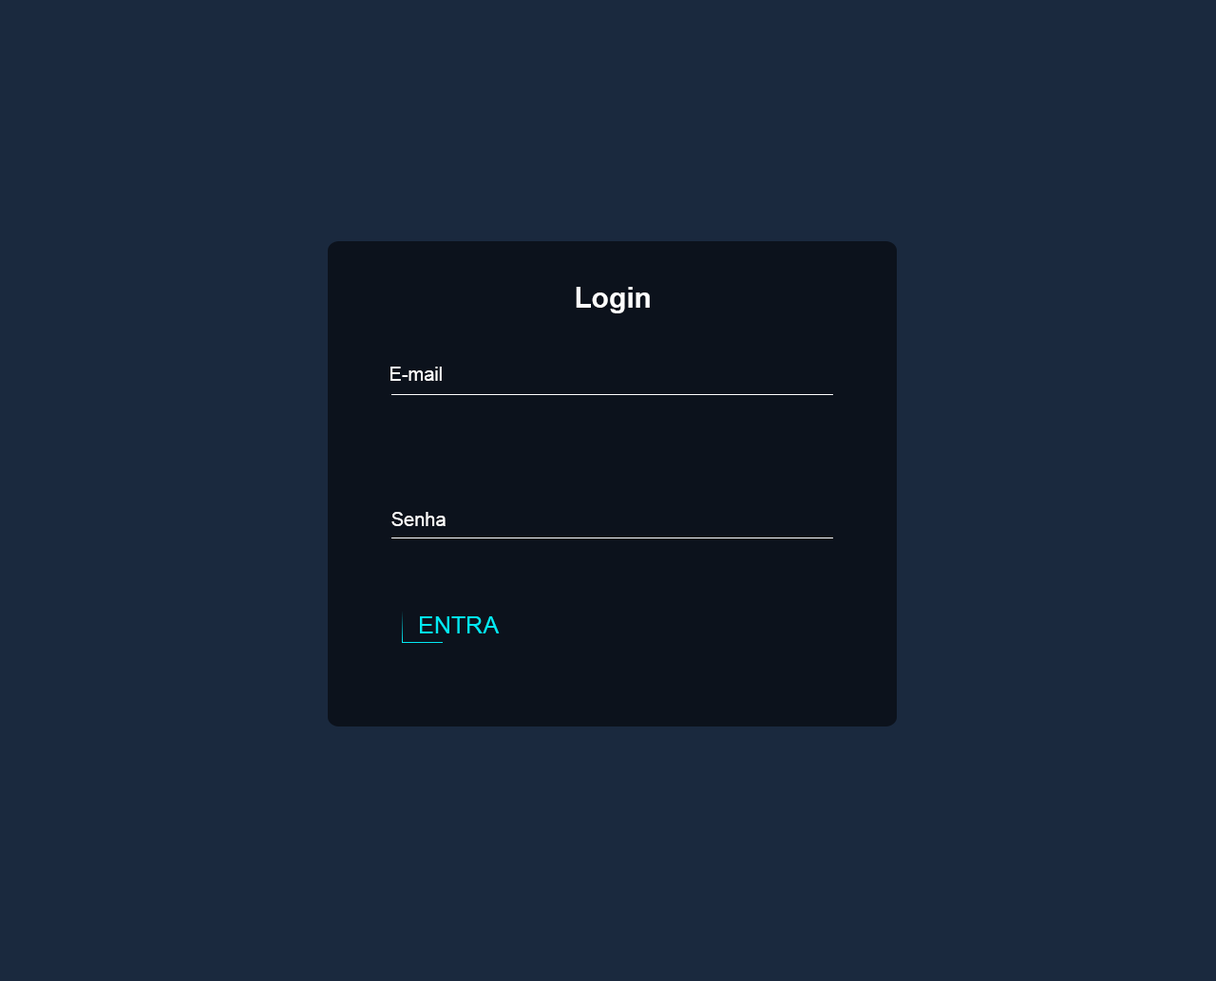
<style>
.page{position:relative;width:1216px;height:981px;background:#1a293e}
.page>*{position:absolute;margin:0}
.t1{font:28.5px "Arial-BoldMT";color:#fefefe}
.t2{font:19px "ArialMT";color:#fefefe}
.t3{font:23.7px "ArialMT";color:#03e9f4}
</style>
<div class="page">
<p class="t1" style="left:575px;top:287px;width:75px;height:26px">Login</p>
<p class="t2" style="left:390px;top:367px;width:52px;height:14px">E-mail</p>
<p class="t2" style="left:391px;top:512px;width:54px;height:14px">Senha</p>
<p class="t3" style="left:420px;top:616px;width:80px;height:17px">ENTRA</p>
</div>
